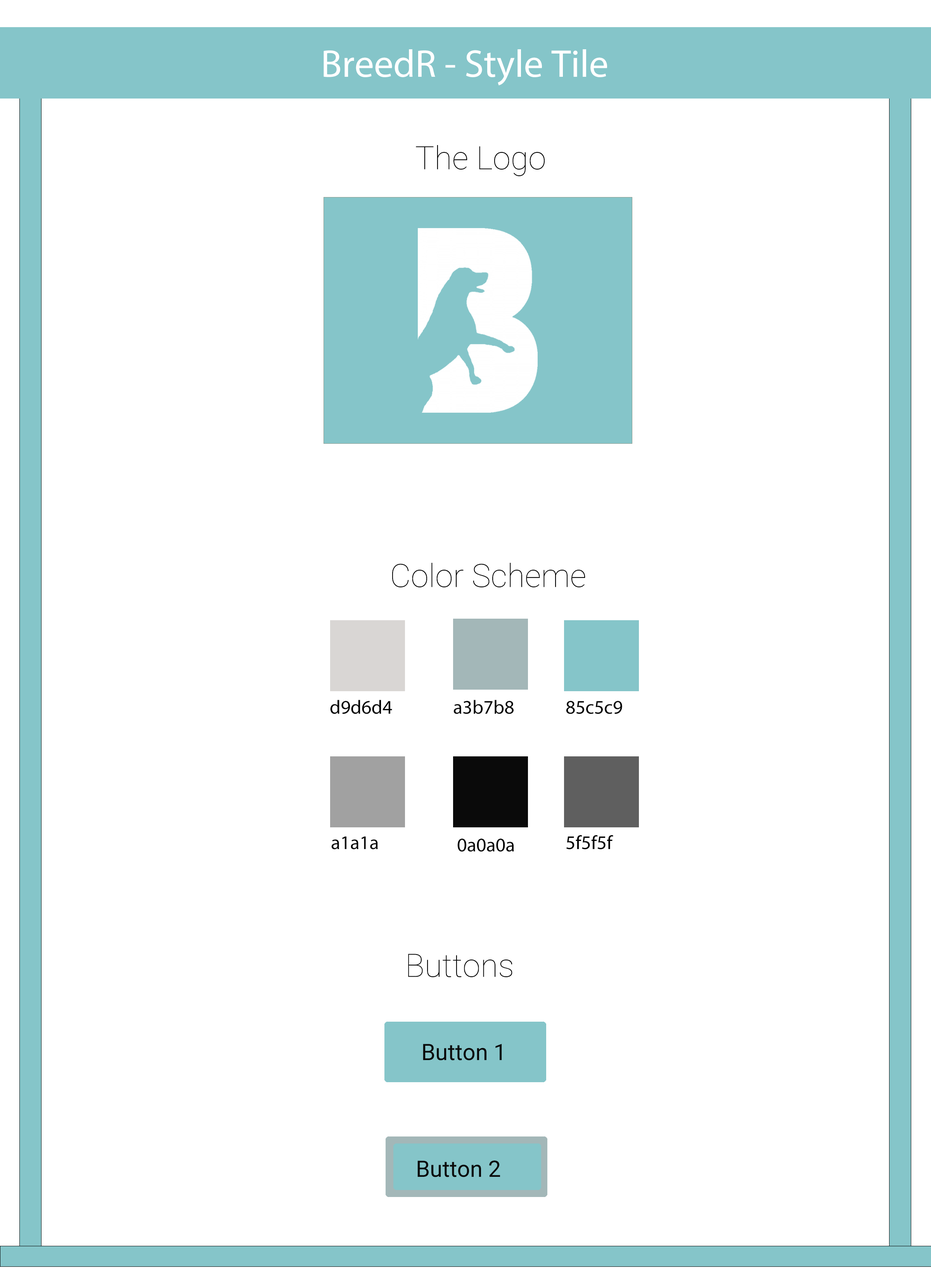
<style>
.page{position:relative;width:931px;height:1280px;background:#ffffff}
.page>*{position:absolute;margin:0}
.t1{font:38.8px "MyriadPro-Regular";color:#ffffff}
.t2{font:32.3px "Roboto-Thin";color:#000000}
.t3{font:19.4px "MyriadPro-Regular";color:#000000}
.t4{font:22.6px "Roboto-Regular";color:#0a0a0a}
</style>
<div class="page">
<p class="t1" style="left:324px;top:49px;width:283px;height:36px">BreedR - Style Tile</p>
<p class="t2" style="left:416px;top:145px;width:129px;height:32px">The Logo</p>
<p class="t2" style="left:392px;top:563px;width:194px;height:25px">Color Scheme</p>
<p class="t3" style="left:330px;top:700px;width:62px;height:14px">d9d6d4</p>
<p class="t3" style="left:454px;top:700px;width:60px;height:14px">a3b7b8</p>
<p class="t3" style="left:566px;top:701px;width:56px;height:13px">85c5c9</p>
<p class="t3" style="left:331px;top:837px;width:47px;height:13px">a1a1a</p>
<p class="t3" style="left:457px;top:839px;width:57px;height:13px">0a0a0a</p>
<p class="t3" style="left:567px;top:835px;width:46px;height:15px">5f5f5f</p>
<p class="t2" style="left:408px;top:954px;width:105px;height:24px">Buttons</p>
<p class="t4" style="left:423px;top:1044px;width:79px;height:17px">Button 1</p>
<p class="t4" style="left:418px;top:1161px;width:82px;height:17px">Button 2</p>
</div>
